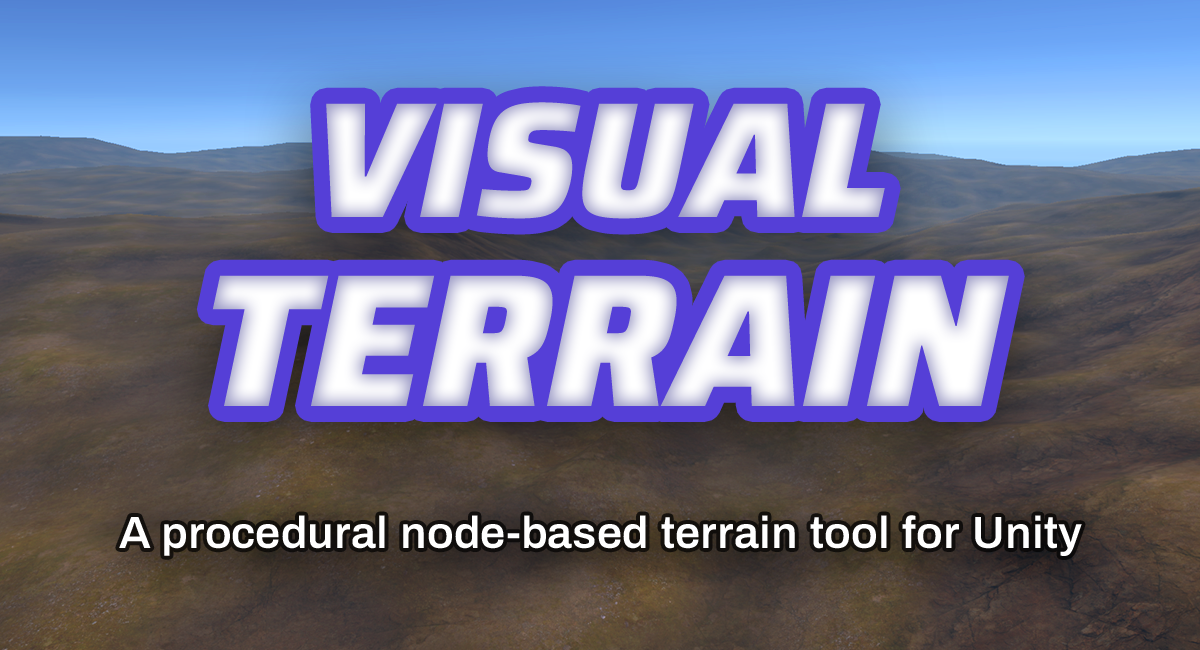
<style>
.page{position:relative;width:1200px;height:650px}
.page>*{position:absolute;margin:0}
.t1{font:164.6px "SairaItalic-BlackItalic";letter-spacing:0.002em}
.t2{font:189.2px "SairaItalic-BlackItalic";letter-spacing:0.002em}
.t3{font:45px "Archivo-SemiBold";letter-spacing:0.002em;color:#ffffff}
</style>
<div class="page">
<p class="t1" style="left:326px;top:102px;width:559px;height:117px">VISUAL</p>
<p class="t2" style="left:212px;top:275px;width:797px;height:131px">TERRAIN</p>
<p class="t3" style="left:119px;top:515px;width:963px;height:41px">A procedural node-based terrain tool for Unity</p>
</div>
